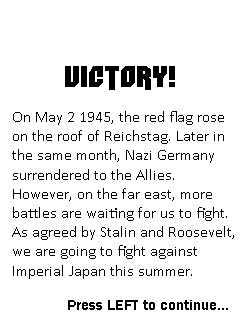
<style>
.page{position:relative;width:240px;height:320px;background:#ffffff}
.page>*{position:absolute;margin:0}
.t1{font:30px "Dimitri";color:#000000}
.t2{font:16px "Calibri";color:#000000}
.t3{font:15px "FranklinGothic-Demi";color:#000000}
</style>
<div class="page">
<p class="t1" style="left:65px;top:66px;width:110px;height:24px">VICTORY!</p>
<p class="t2" style="left:12px;top:111px;width:222px;height:168px">On May 2 1945, the red flag rose<br>on the roof of Reichstag. Later in<br>the same month, Nazi Germany <br>surrendered to the Allies. <br>However, on the far east, more <br>battles are waiting for us to fight.<br>As agreed by Stalin and Roosevelt,<br>we are going to fight against <br>Imperial Japan this summer.</p>
<p class="t3" style="left:68px;top:300px;width:160px;height:10px">Press LEFT to continue...</p>
</div>
